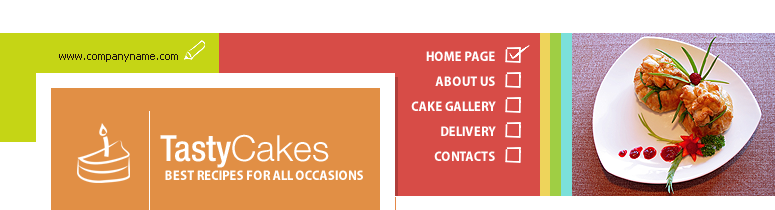
<style>
.page{position:relative;width:775px;height:210px;background:#ffffff}
.page>*{position:absolute;margin:0}
.t1{font:11px "Tahoma";color:#1e1210}
.t2{font:14px "MyriadPro-BoldSemiCn";color:#ffffff}
.t3{font:36px "HelveticaNeueLTPro-MdCn";color:#ffffff}
.t4{font:36px "HelveticaNeueLTPro-Lt";color:#ffffff}
</style>
<div class="page">
<p class="t1" style="left:59px;top:54px;width:119px;height:8px">www.companyname.com</p>
<p class="t2" style="left:426px;top:49px;width:69px;height:15px">HOME PAGE</p>
<p class="t2" style="left:435px;top:74px;width:60px;height:15px">ABOUT US</p>
<p class="t2" style="left:411px;top:99px;width:85px;height:15px">CAKE GALLERY</p>
<p class="t2" style="left:440px;top:124px;width:56px;height:15px">DELIVERY</p>
<p class="t3" style="left:160px;top:134px;width:169px;height:34px">Tasty<span class="t4">Cakes</span></p>
<p class="t2" style="left:434px;top:149px;width:61px;height:15px">CONTACTS</p>
<p class="t2" style="left:164px;top:168px;width:200px;height:15px">BEST RECIPES FOR ALL OCCASIONS</p>
</div>
